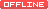
<style>
.page{position:relative;width:48px;height:9px;background:#ff4c4c}
.page>*{position:absolute;margin:0}
.t1{font:8px "5x5-Pixel";color:#ffffff}
</style>
<div class="page">
<p class="t1" style="left:4px;top:2px;width:40px;height:5px">offline</p>
</div>
